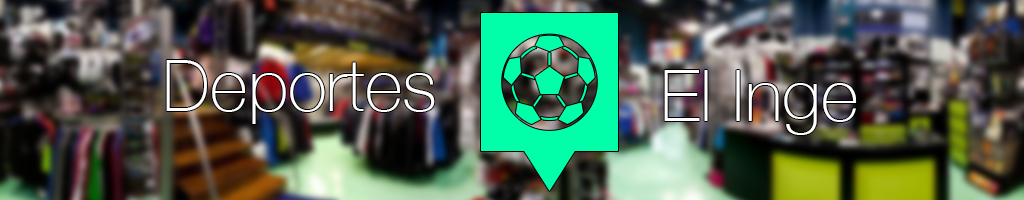
<style>
.page{position:relative;width:1024px;height:200px}
.page>*{position:absolute;margin:0}
.t1{font:72px "HelveticaNeue-Thin";color:#ffffff}
</style>
<div class="page">
<p class="t1" style="left:166px;top:60px;width:269px;height:64px">Deportes</p>
<p class="t1" style="left:664px;top:70px;width:193px;height:65px">El Inge</p>
</div>
